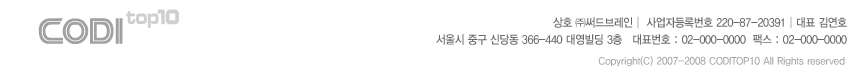
<style>
.page{position:relative;width:858px;height:84px;background:#ffffff}
.page>*{position:absolute;margin:0}
.t1{font:11.7px/17px "YDIYGO330";letter-spacing:-0.025em;color:#6a6a6a;scale:0.91 1}
.t2{font:10.6px "YDIYGO330";color:#a3a3a3;scale:0.91 1}
</style>
<div class="page">
<p class="t1" style="left:436px;top:16px;width:411px;height:29px;text-align:right">상호 ㈜써드브레인│ 사업자등록번호 220-87-20391│대표 김연호<br>서울시 중구 신당동 366-440 대영빌딩 3층   대표번호 : 02-000-0000  팩스 : 02-000-0000</p>
<p class="t2" style="left:598px;top:55px;width:247px;height:11px">Copyright(C) 2007-2008 CODITOP10 All Rights reserved</p>
</div>
